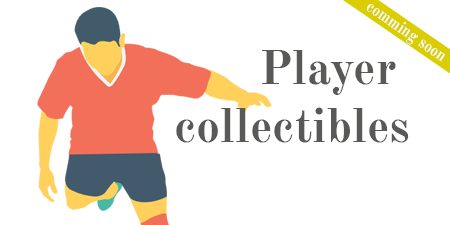
<style>
.page{position:relative;width:450px;height:225px;background:#ffffff}
.page>*{position:absolute;margin:0}
.t1{font:48px "OldStandardTT-Bold";color:#595957}
</style>
<div class="page">
<p class="t1" style="left:176px;top:50px;width:233px;height:93px">Player <br>collectibles</p>
</div>
